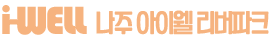
<style>
.page{position:relative;width:270px;height:37px;background:#ffffff}
.page>*{position:absolute;margin:0}
.t1{font:41.1px "Bauhaus93";letter-spacing:-0.075em;color:#f6b37f}
.t2{font:28.7px "New";letter-spacing:-0.075em;color:#f6b37f}
</style>
<div class="page">
<p class="t1" style="left:2px;top:5px;width:85px;height:30px">i-WELL</p>
<p class="t2" style="left:96px;top:10px;width:173px;height:25px">나주 아이웰 리버파크</p>
</div>
